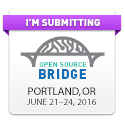
<style>
.page{position:relative;width:125px;height:125px;background:#ffffff}
.page>*{position:absolute;margin:0}
.t1{font:10px "DIN-Black";color:#ffffff}
.t2{font:7px "DINPro-Bold";letter-spacing:0.02em;color:#08b9a6}
.t3{font:13px "DINPro-Black";letter-spacing:0.06em;color:#116db6}
.t4{font:13px "DINPro-Black";letter-spacing:0.02em;color:#116db6}
.t5{font:13px "DINPro-Black";letter-spacing:0.03em;color:#116db6}
.t6{font:9px/10px "DIN-Bold";letter-spacing:0.02em;color:#000000}
.t7{font:11px/10px "DIN-Bold";color:#000000}
</style>
<div class="page">
<p class="t1" style="left:26px;top:19px;width:74px;height:7px">I’M SUBMITTING</p>
<p class="t2" style="left:39px;top:62px;width:48px;height:5px">OPEN SOURCE</p>
<p class="t3" style="left:39px;top:69px;width:47px;height:10px"><span class="t4">B</span>RI<span class="t5">D</span><span class="t4">GE</span></p>
<p class="t6" style="left:27px;top:87px;width:69px;height:19px;text-align:center"><span class="t7">PORTLAND, OR<br></span>JUNE 21–24, 2016</p>
</div>
